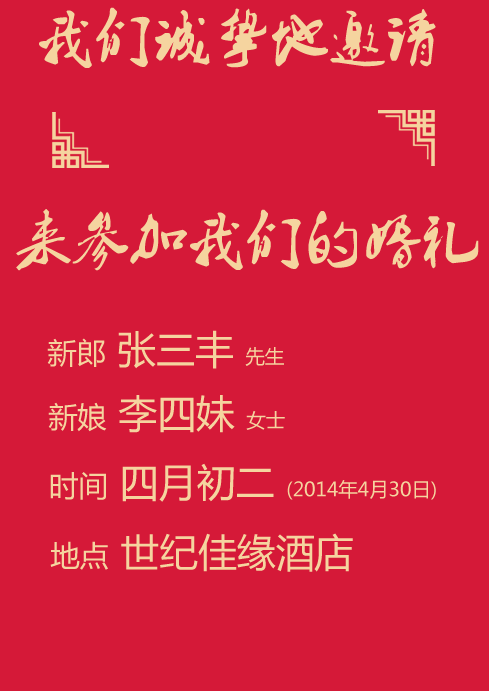
<style>
.page{position:relative;width:489px;height:691px;background:#d51938}
.page>*{position:absolute;margin:0}
.t1{font:58.3px "2.0-";color:#f5d49f}
.t2{font:38.9px "MicrosoftYaHei";color:#f5d49f}
.t3{font:29.2px "MicrosoftYaHei";color:#f5d49f}
.t4{font:19.4px "MicrosoftYaHei";color:#f5d49f}
</style>
<div class="page">
<p class="t1" style="left:39px;top:7px;width:397px;height:61px">我们诚挚地邀请</p>
<p class="t1" style="left:16px;top:209px;width:463px;height:62px">来参加我们的婚礼</p>
<p class="t2" style="left:47px;top:330px;width:237px;height:39px"><span class="t3">新郎 </span>张三丰 <span class="t4">先生</span></p>
<p class="t2" style="left:48px;top:395px;width:237px;height:38px"><span class="t3">新娘 </span>李四妹 <span class="t4">女士</span></p>
<p class="t4" style="left:50px;top:463px;width:386px;height:39px"><span class="t3">时间</span><span class="t2"> 四月初二 </span>(2014年4月30日)</p>
<p class="t2" style="left:50px;top:533px;width:303px;height:39px"><span class="t3">地点 </span>世纪佳缘酒店</p>
</div>
